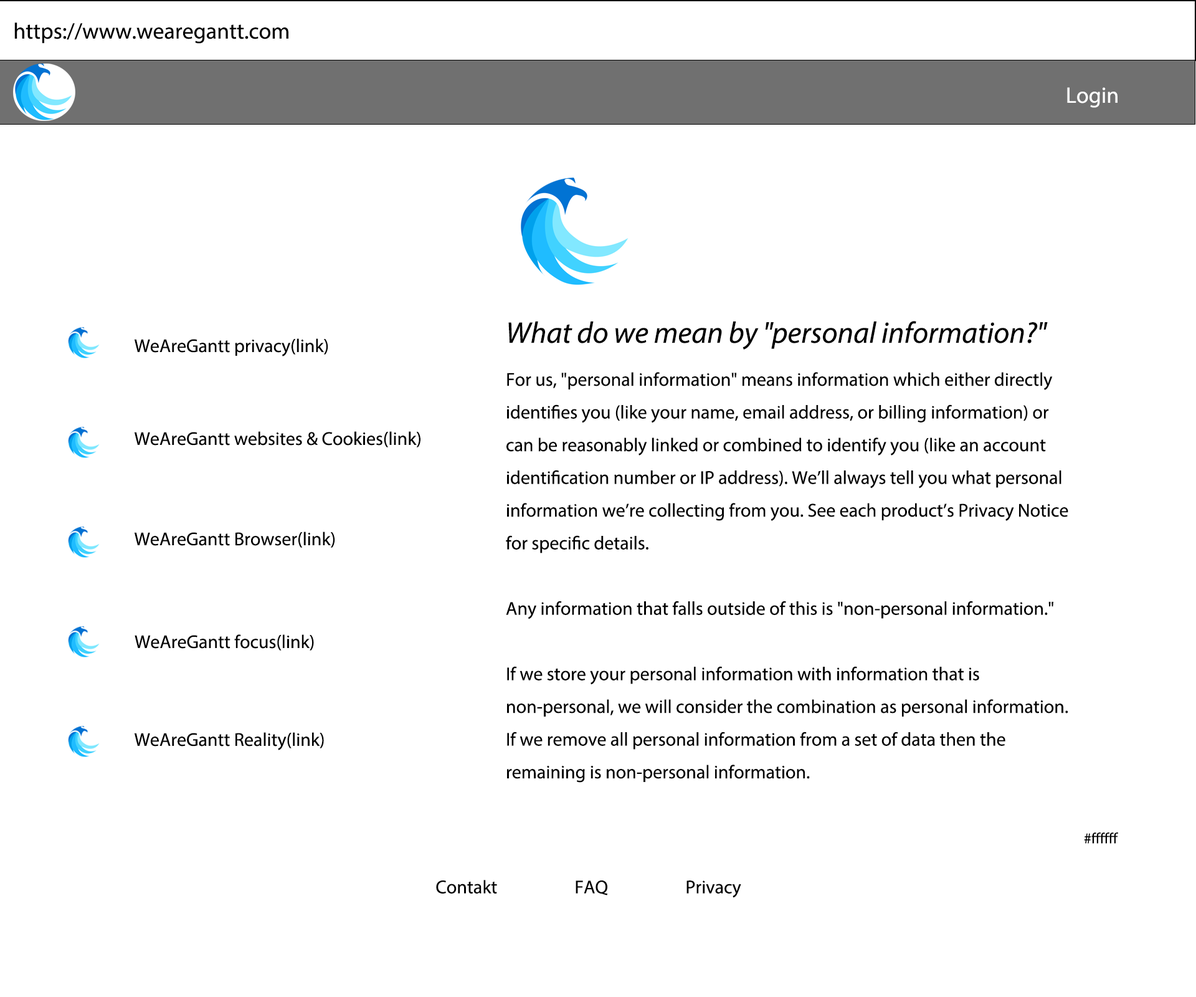
<style>
.page{position:relative;width:1196px;height:997px;background:#ffffff}
.page>*{position:absolute;margin:0}
.t1{font:22.4px "MyriadPro-Regular";color:#000000}
.t2{font:22.4px "MyriadPro-Regular";color:#ffffff}
.t3{font:18.7px "MyriadPro-Regular";color:#000000}
.t4{font:29.9px "MyriadPro-It";color:#000000}
.t5{font:15px "MyriadPro-Regular";color:#000000}
</style>
<div class="page">
<p class="t1" style="left:14px;top:22px;width:274px;height:22px">https://www.wearegantt.com</p>
<p class="t2" style="left:1067px;top:87px;width:51px;height:21px">Login</p>
<p class="t3" style="left:506px;top:321px;width:562px;height:462px"><span class="t4">What do we mean by "personal information?"<br></span>For us, "personal information" means information which either directly identifies you (like your name, email address, or billing information) or can be reasonably linked or combined to identify you (like an account identification number or IP address). We’ll always tell you what personal information we’re collecting from you. See each product’s Privacy Notice for specific details.<br><br>Any information that falls outside of this is "non-personal information."<br><br>If we store your personal information with information that is non-personal, we will consider the combination as personal information. If we remove all personal information from a set of data then the remaining is non-personal information.</p>
<p class="t3" style="left:134px;top:338px;width:194px;height:18px">WeAreGantt privacy(link)</p>
<p class="t3" style="left:134px;top:431px;width:287px;height:16px">WeAreGantt websites &amp; Cookies(link)</p>
<p class="t3" style="left:134px;top:531px;width:201px;height:17px">WeAreGantt Browser(link)</p>
<p class="t3" style="left:135px;top:634px;width:179px;height:16px">WeAreGantt focus(link)</p>
<p class="t3" style="left:134px;top:732px;width:190px;height:18px">WeAreGantt Reality(link)</p>
<p class="t5" style="left:1084px;top:832px;width:34px;height:12px">#ffffff</p>
<p class="t3" style="left:436px;top:880px;width:61px;height:13px">Contakt</p>
<p class="t3" style="left:576px;top:880px;width:32px;height:15px">FAQ</p>
<p class="t3" style="left:687px;top:880px;width:54px;height:18px">Privacy</p>
</div>
